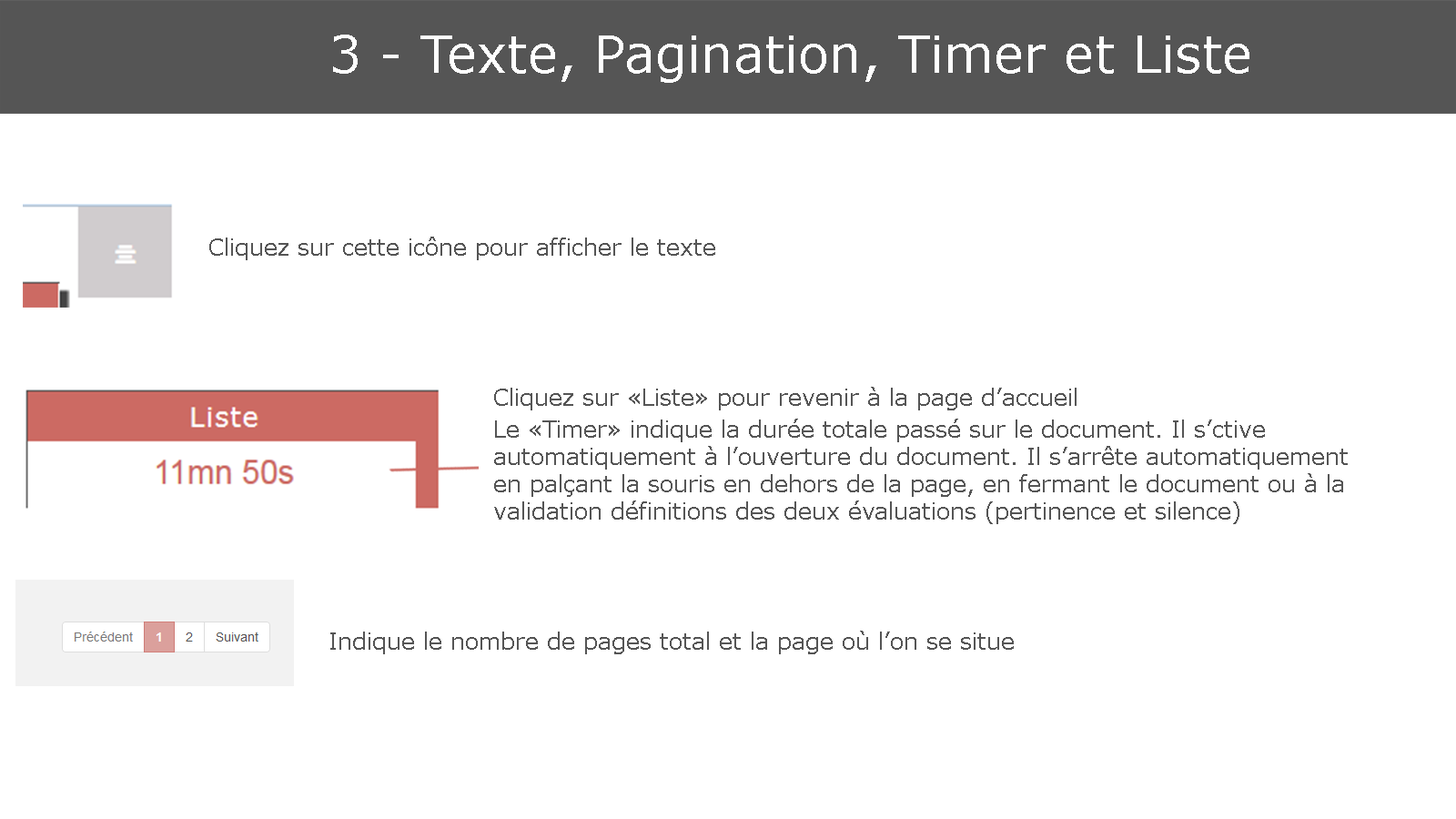
<style>
.page{position:relative;width:1456px;height:819px;background:#ffffff}
.page>*{position:absolute;margin:0}
.t1{font:51.2px "Verdana";color:#ffffff}
.t2{font:10.9px "Verdana";color:#555555}
</style>
<div class="page">
<p class="t1" style="left:333px;top:35px;width:916px;height:48px">3 - Texte, Pagination, Timer et Liste</p>
<p class="t2" style="left:209px;top:237px;width:506px;height:23px">Cliquez sur cette icône pour afficher le texte</p>
<p class="t2" style="left:494px;top:387px;width:583px;height:23px">Cliquez sur «Liste» pour revenir à la page d’accueil</p>
<p class="t2" style="left:494px;top:419px;width:854px;height:105px">Le «Timer» indique la durée totale passé sur le document. Il s’ctive automatiquement à l’ouverture du document. Il s’arrête automatiquement en palçant la souris en dehors de la page, en fermant le document ou à la validation définitions des deux évaluations (pertinence et silence)</p>
<p class="t2" style="left:330px;top:631px;width:684px;height:23px">Indique le nombre de pages total et la page où l’on se situe</p>
</div>
